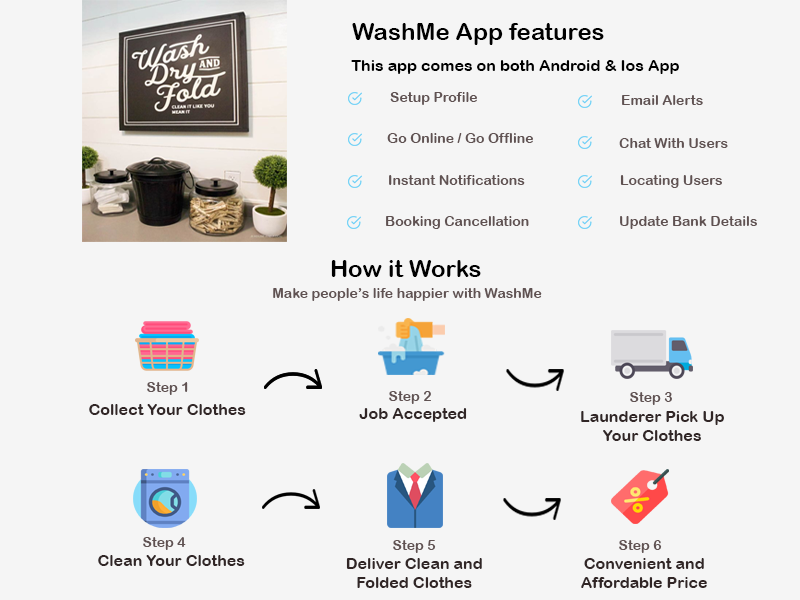
<style>
.page{position:relative;width:800px;height:600px;background:#f5f5f5}
.page>*{position:absolute;margin:0}
.t1{font:24px "ArialRoundedMTBold";color:#000000}
.t2{font:16px "ArialRoundedMTBold";color:#000000}
.t3{font:14px "ArialRoundedMTBold";color:#605252}
.t4{font:16px "ArialRoundedMTBold";color:#312626}
</style>
<div class="page">
<p class="t1" style="left:352px;top:23px;width:252px;height:22px">WashMe App features</p>
<p class="t2" style="left:351px;top:60px;width:328px;height:14px">This app comes on both Android &amp; Ios App</p>
<p class="t3" style="left:390px;top:92px;width:87px;height:13px">Setup Profile</p>
<p class="t3" style="left:622px;top:95px;width:81px;height:10px">Email Alerts</p>
<p class="t3" style="left:387px;top:133px;width:146px;height:10px">Go Online / Go Offline</p>
<p class="t3" style="left:619px;top:138px;width:109px;height:10px">Chat With Users</p>
<p class="t3" style="left:389px;top:175px;width:136px;height:10px">Instant Notifications</p>
<p class="t3" style="left:620px;top:175px;width:102px;height:13px">Locating Users</p>
<p class="t3" style="left:386px;top:216px;width:143px;height:13px">Booking Cancellation</p>
<p class="t3" style="left:620px;top:216px;width:137px;height:13px">Update Bank Details</p>
<p class="t1" style="left:331px;top:260px;width:150px;height:17px">How it Works</p>
<p class="t3" style="left:273px;top:288px;width:269px;height:13px">Make people’s life happier with WashMe</p>
<p class="t3" style="left:147px;top:382px;width:41px;height:13px">Step 1</p>
<p class="t3" style="left:389px;top:391px;width:42px;height:13px">Step 2</p>
<p class="t3" style="left:630px;top:392px;width:42px;height:13px">Step 3</p>
<p class="t4" style="left:89px;top:404px;width:157px;height:11px">Collect Your Clothes</p>
<p class="t4" style="left:359px;top:408px;width:108px;height:14px">Job Accepted</p>
<p class="t4" style="left:581px;top:411px;width:143px;height:30px;text-align:center">Launderer Pick Up<br>Your Clothes</p>
<p class="t3" style="left:143px;top:537px;width:43px;height:13px">Step 4</p>
<p class="t3" style="left:393px;top:540px;width:43px;height:13px">Step 5</p>
<p class="t3" style="left:619px;top:540px;width:43px;height:13px">Step 6</p>
<p class="t4" style="left:98px;top:555px;width:147px;height:11px">Clean Your Clothes</p>
<p class="t4" style="left:346px;top:558px;width:136px;height:30px;text-align:center">Deliver Clean and<br>Folded Clothes</p>
<p class="t4" style="left:581px;top:558px;width:126px;height:30px;text-align:center">Convenient and<br>Affordable Price</p>
</div>
